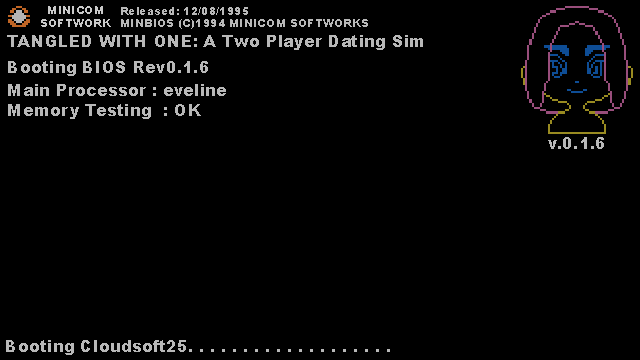
<style>
.page{position:relative;width:640px;height:360px;background:#000000}
.page>*{position:absolute;margin:0}
.t1{font:11.2px "Arial-Black";color:#c9c9c9}
.t2{font:11.2px "Arial-Black";color:#b8b8b8}
.t3{font:16.5px "Arial-Black";color:#b8b8b8}
</style>
<div class="page">
<p class="t1" style="left:41px;top:6px;width:70px;height:21px;text-align:center">MINICOM<br>SOFTWORK</p>
<p class="t2" style="left:121px;top:7px;width:127px;height:8px">Released: 12/08/1995</p>
<p class="t2" style="left:121px;top:19px;width:247px;height:10px">MINBIOS (C)1994 MINICOM SOFTWORKS</p>
<p class="t3" style="left:7px;top:35px;width:416px;height:15px">TANGLED WITH ONE: A Two Player Dating Sim</p>
<p class="t3" style="left:8px;top:61px;width:200px;height:15px">Booting BIOS Rev0.1.6</p>
<p class="t3" style="left:8px;top:84px;width:218px;height:35px">Main Processor : eveline<br>Memory Testing  : OK</p>
<p class="t3" style="left:548px;top:137px;width:56px;height:12px">v.0.1.6</p>
<p class="t3" style="left:6px;top:340px;width:384px;height:15px">Booting Cloudsoft25. . . . . . . . . . . . . . . . . . .</p>
</div>
